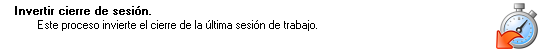
<style>
.page{position:relative;width:552px;height:52px;background:#ffffff}
.page>*{position:absolute;margin:0}
.t1{font:11.4px "MS Sans Serif";color:#000000;font-weight:bold}
.t2{font:11.4px "MS Sans Serif";color:#000000}
</style>
<div class="page">
<p class="t1" style="left:15px;top:6px;width:136px;height:9px">Invertir cierre de sesión.</p>
<p class="t2" style="left:38px;top:20px;width:279px;height:11px">Este proceso invierte el cierre de la última sesión de trabajo.</p>
</div>
